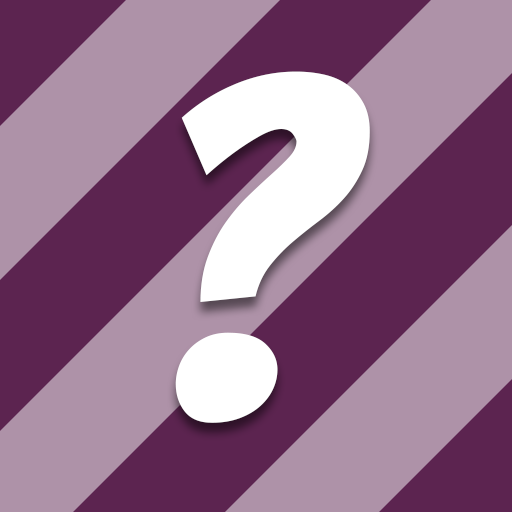
<style>
.page{position:relative;width:512px;height:512px;background:#ae92a8}
.page>*{position:absolute;margin:0}
.t1{font:466.3px "Bangers-Regular";color:#ffffff}
</style>
<div class="page">
<p class="t1" style="left:175px;top:71px;width:195px;height:352px">?</p>
</div>
